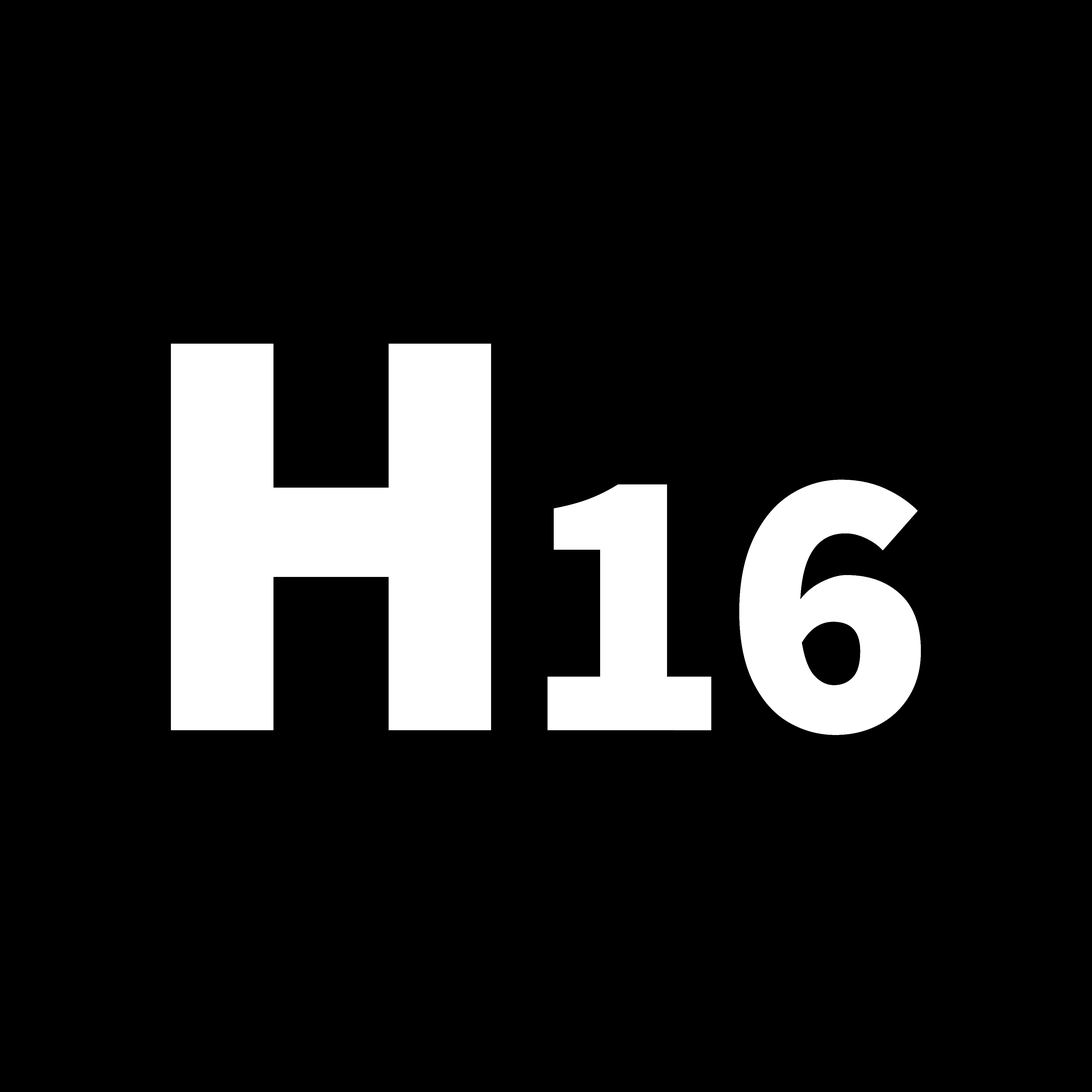
<style>
.page{position:relative;width:1092px;height:1092px;background:#000000}
.page>*{position:absolute;margin:0}
.t1{font:387.7px "Assistant-ExtraBold";color:#ffffff}
.t2{font:594.6px "Assistant-ExtraBold";color:#ffffff}
</style>
<div class="page">
<p class="t1" style="left:171px;top:344px;width:750px;height:391px"><span class="t2">H</span>16</p>
</div>
